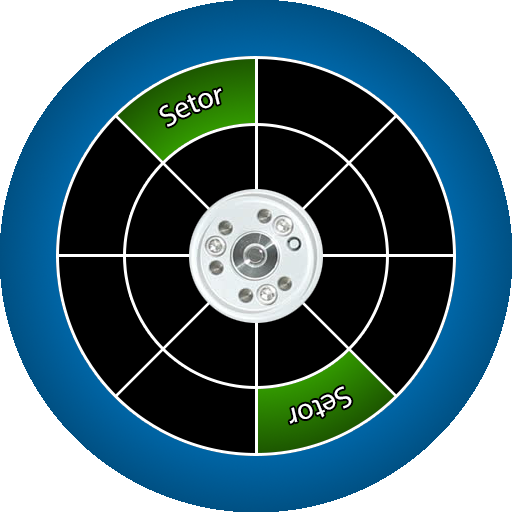
<style>
.page{position:relative;width:512px;height:512px;background:#000000}
.page>*{position:absolute;margin:0}
.t1{font:30px "MyriadPro-Regular";color:#ffffff}
</style>
<div class="page">
<p class="t1" style="left:159px;top:88px;width:63px;height:39px">Setor</p>
<p class="t1" style="left:289px;top:386px;width:63px;height:38px">Setor</p>
</div>
